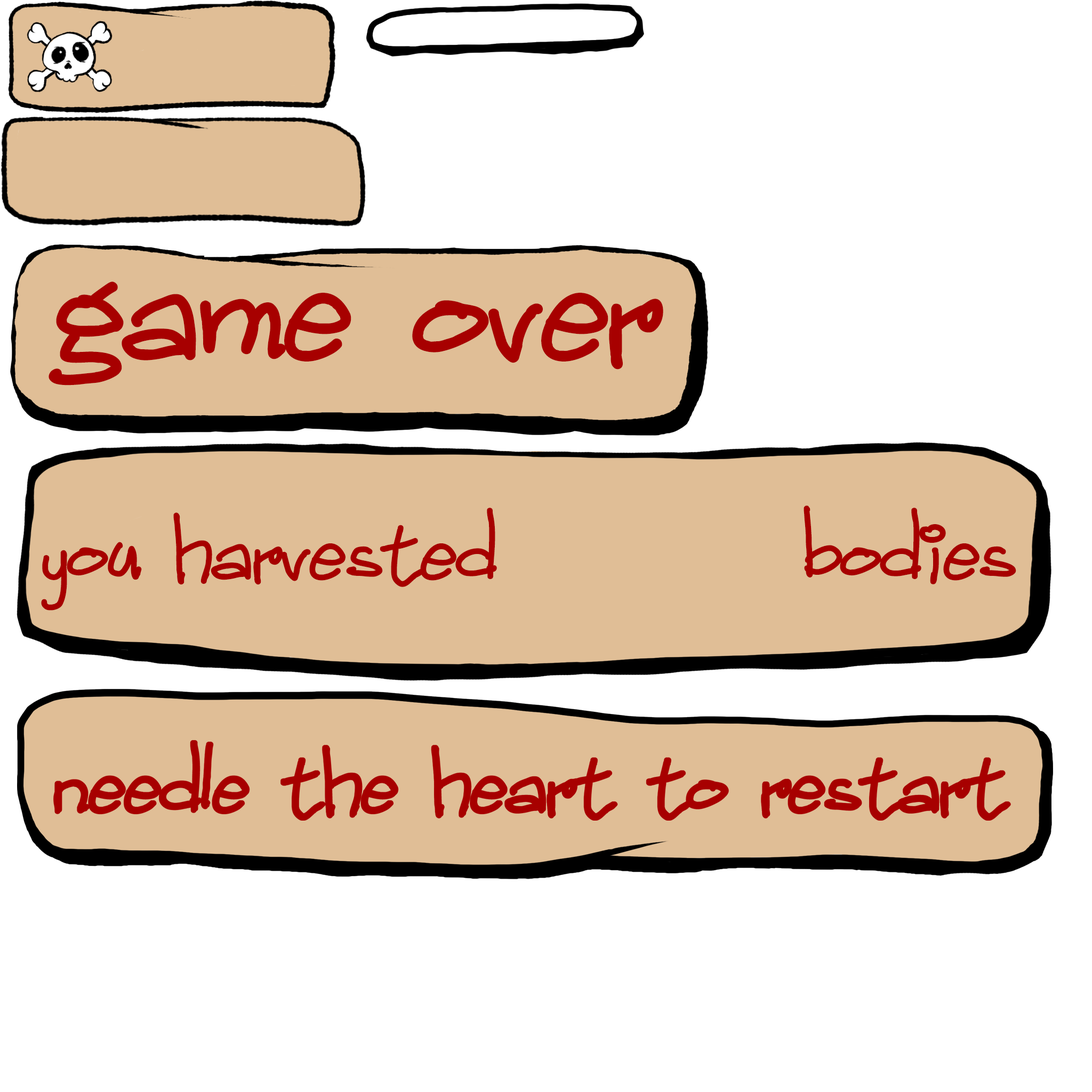
<style>
.page{position:relative;width:1092px;height:1092px;background:#ffffff}
.page>*{position:absolute;margin:0}
.t1{font:249.5px "ChildrenHandwritten";letter-spacing:-0.05em;color:#a70000}
.t2{font:134.4px "ChildrenHandwritten";letter-spacing:-0.05em;color:#a70000}
</style>
<div class="page">
<p class="t1" style="left:49px;top:282px;width:614px;height:104px">game over</p>
<p class="t2" style="left:41px;top:505px;width:975px;height:106px">you harvested         bodies</p>
</div>
